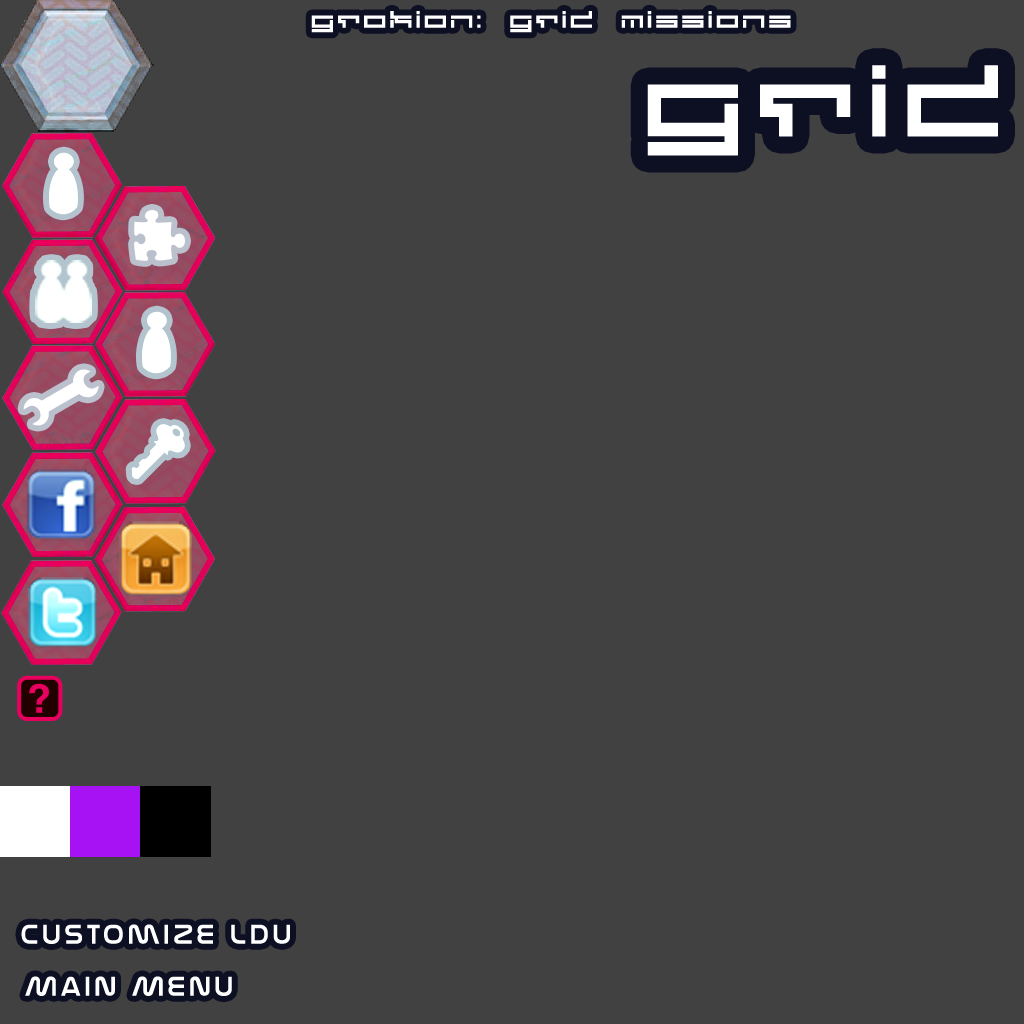
<style>
.page{position:relative;width:1024px;height:1024px;background:#414141}
.page>*{position:absolute;margin:0}
.t1{font:29.9px "Depthcorepublic";letter-spacing:0.1em;color:#ffffff;font-weight:bold}
.t2{font:128.1px "Depthcorepublic";letter-spacing:0.1em;color:#ffffff;font-weight:bold}
.t3{font:29.9px "Nasalization";letter-spacing:0.1em;color:#ffffff;font-weight:bold}
</style>
<div class="page">
<p class="t1" style="left:311px;top:11px;width:480px;height:22px">GROKION: GRID MISSIONS</p>
<p class="t2" style="left:647px;top:65px;width:351px;height:91px">GRID</p>
<p class="t3" style="left:21px;top:924px;width:269px;height:20px">customize LDU</p>
<p class="t3" style="left:25px;top:976px;width:207px;height:20px">Main Menu</p>
</div>
